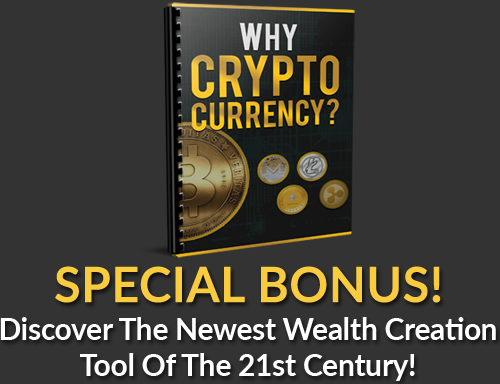
<style>
.page{position:relative;width:500px;height:384px;background:#333333}
.page>*{position:absolute;margin:0}
.t1{font:48px "Lato-Semibold";letter-spacing:-0.01em;color:#f9cc40;font-weight:bold}
.t2{font:30px/36px "Lato-Bold";letter-spacing:-0.01em;color:#ffffff}
</style>
<div class="page">
<p class="t1" style="left:55px;top:266px;width:386px;height:37px">SPECIAL BONUS!</p>
<p class="t2" style="left:0px;top:317px;width:496px;height:64px;text-align:center">Discover The Newest Wealth Creation<br>Tool Of The 21st Century!</p>
</div>
